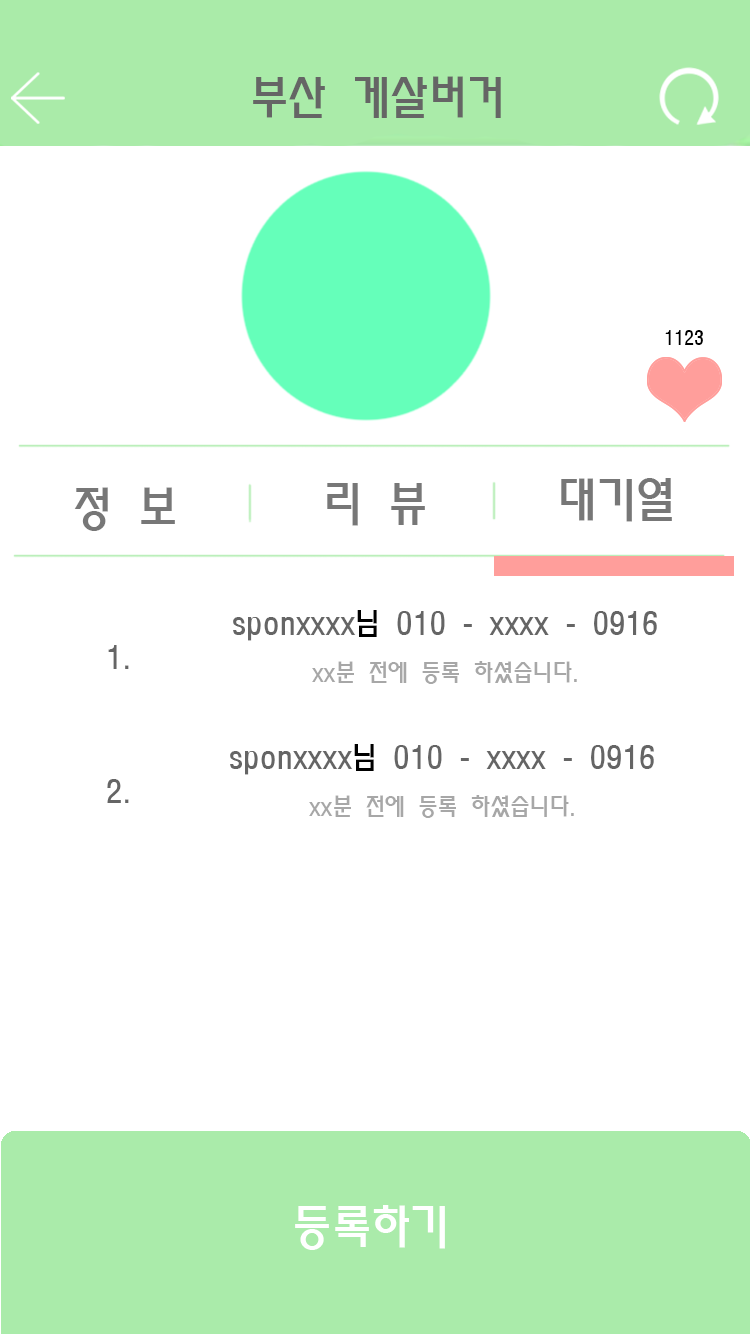
<style>
.page{position:relative;width:750px;height:1334px;background:#ffffff}
.page>*{position:absolute;margin:0}
.t1{font:46.6px "MoeumTR-HM";color:#656565}
.t2{font:18px "MoeumTR-HM";color:#000000}
.t3{font:48px "MoeumTR-HM";color:#777777}
.t4{font:30px "MoeumTR-HM";color:#656565}
.t5{font:30px "MoeumTR-HM";color:#000000}
.t6{font:24px "MoeumTR-HM";color:#a7a7a7}
.t7{font:48px "MoeumTR-HM";color:#ffffff}
</style>
<div class="page">
<p class="t1" style="left:253px;top:76px;width:248px;height:42px">부산 게살버거</p>
<p class="t2" style="left:665px;top:330px;width:38px;height:15px">1123</p>
<p class="t3" style="left:327px;top:483px;width:98px;height:43px">리 뷰</p>
<p class="t3" style="left:561px;top:478px;width:111px;height:44px">대기열</p>
<p class="t3" style="left:74px;top:487px;width:101px;height:44px">정 보</p>
<p class="t4" style="left:233px;top:610px;width:424px;height:74px;text-align:center">sponxxxx<span class="t5">님 </span>010 - xxxx - 0916<br><span class="t6">xx분 전에 등록 하셨습니다.</span></p>
<p class="t4" style="left:108px;top:645px;width:21px;height:24px">1.</p>
<p class="t4" style="left:230px;top:744px;width:424px;height:74px;text-align:center">sponxxxx<span class="t5">님 </span>010 - xxxx - 0916<br><span class="t6">xx분 전에 등록 하셨습니다.</span></p>
<p class="t4" style="left:107px;top:779px;width:22px;height:24px">2.</p>
<p class="t7" style="left:295px;top:1205px;width:150px;height:45px">등록하기</p>
</div>
